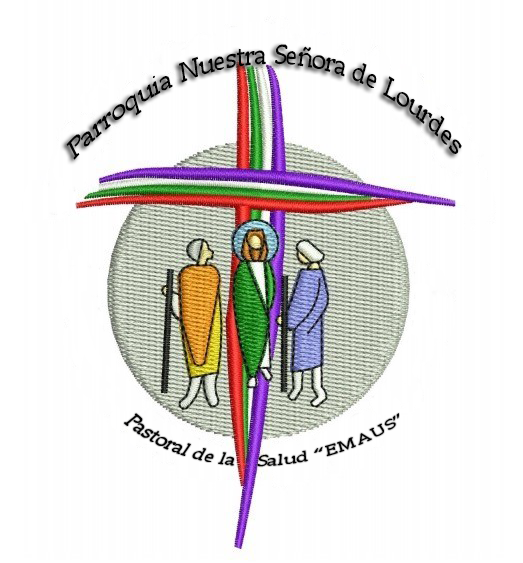
<style>
.page{position:relative;width:523px;height:563px;background:#fefefe}
.page>*{position:absolute;margin:0}
.t1{font:26.7px "PalatinoLinotype-Roman";color:#030303;scale:0.7 1}
.t2{font:13.5px "PalatinoLinotype-Roman";color:#030303;scale:1.28 1}
</style>
<div class="page">
<p class="t1" style="left:66px;top:44px;width:396px;height:116px;rotate:9deg">Parroquia Nuestra Señora de Lourdes</p>
<p class="t2" style="left:123px;top:413px;width:276px;height:54px;rotate:-15deg">Pastoral de la    Salud “EMAUS”</p>
</div>
